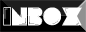
<style>
.page{position:relative;width:86px;height:32px;background:#ffffff}
.page>*{position:absolute;margin:0}
.t1{font:18px "PacFont";color:#ffffff}
</style>
<div class="page">
<p class="t1" style="left:3px;top:7px;width:79px;height:19px">Inbox</p>
</div>
